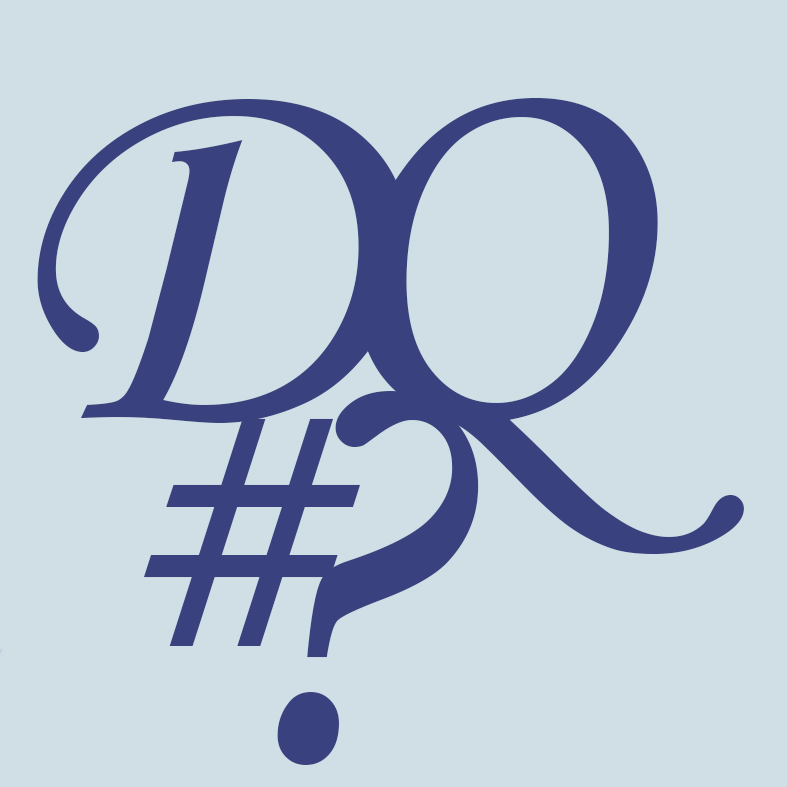
<style>
.page{position:relative;width:787px;height:787px;background:#d0dee6}
.page>*{position:absolute;margin:0}
.t1{font:541.7px "MonotypeCorsiva";color:#39427e}
.t2{font:625px "MonotypeCorsiva";color:#39427e}
.t3{font:402.8px "MonotypeCorsiva";color:#39427e}
</style>
<div class="page">
<p class="t1" style="left:37px;top:98px;width:371px;height:325px">D</p>
<p class="t1" style="left:358px;top:97px;width:386px;height:457px">Q</p>
<p class="t2" style="left:277px;top:390px;width:202px;height:375px">?</p>
<p class="t3" style="left:143px;top:418px;width:217px;height:228px">#</p>
</div>
